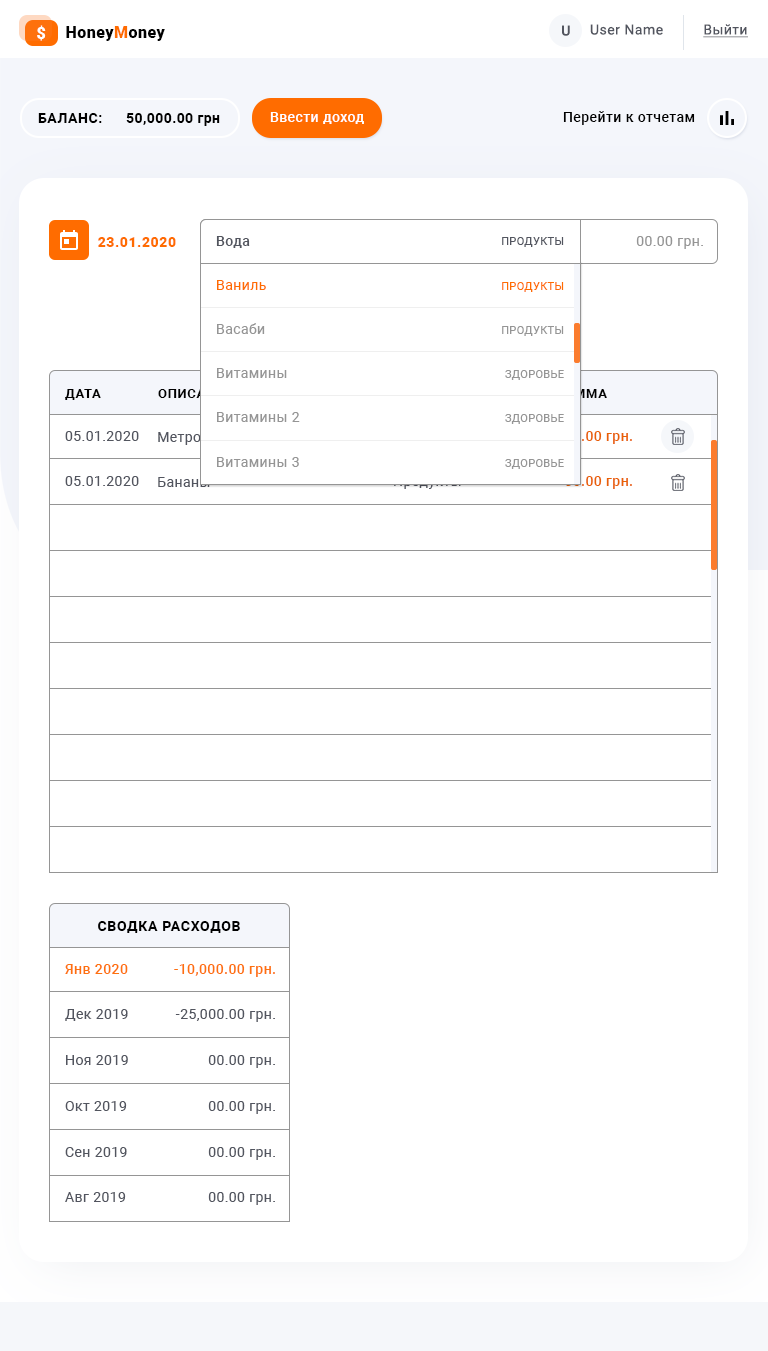
<style>
.page{position:relative;width:768px;height:1351px;background:#ffffff}
.page>*{position:absolute;margin:0}
.t1{font:16px "Roboto-Black";letter-spacing:0.03em;color:#ffffff}
.t2{font:16px "Roboto-Black";letter-spacing:0.03em;color:#000000}
.t3{font:16px "Roboto-Black";letter-spacing:0.03em;color:#ff6c00}
.t4{font:14px "Roboto-Medium";letter-spacing:0.035em;color:#52555f}
.t5{font:14px "Roboto-Regular";letter-spacing:0.035em;color:#52555f}
.t6{font:14px "Roboto-Regular";letter-spacing:0.03em;color:#52555f;text-decoration:underline}
.t7{font:14px "Roboto-Bold";letter-spacing:0.04em;color:#000000;text-transform:uppercase}
.t8{font:14px "Roboto-Bold";letter-spacing:0.03em;color:#000000}
.t9{font:14px "Roboto-Medium";letter-spacing:0.03em;color:#ffffff}
.t10{font:14px "Roboto-Medium";letter-spacing:0.03em;color:#000000}
.t11{font:14px "Roboto-Black";letter-spacing:0.04em;color:#ff6c00}
.t12{font:14px "Roboto-Medium";letter-spacing:0.03em;color:#52555f}
.t13{font:11px "Roboto-Regular";letter-spacing:0.03em;color:#52555f;text-transform:uppercase}
.t14{font:14px "Roboto-Regular";letter-spacing:0.03em;color:#959595}
.t15{font:14px "Roboto-Regular";letter-spacing:0.03em;color:#ff6c00}
.t16{font:11px "Roboto-Regular";letter-spacing:0.03em;color:#ff6c00;text-transform:uppercase}
.t17{font:11px "Roboto-Regular";letter-spacing:0.03em;color:#959595;text-transform:uppercase}
.t18{font:13px "Roboto-Bold";letter-spacing:0.05em;color:#000000;text-transform:uppercase}
.t19{font:13px "Roboto-Bold";letter-spacing:0.05em;text-transform:uppercase}
.t20{font:14px "Roboto-Regular";letter-spacing:0.03em;color:#52555f}
.t21{font:14px "Roboto-Regular";letter-spacing:0.03em;color:#ffffff}
.t22{font:14px "Roboto-Medium";letter-spacing:0.03em}
.t23{font:14px "Roboto-Bold";letter-spacing:0.05em;color:#000000;text-transform:uppercase}
.t24{font:14px "Roboto-Medium";letter-spacing:0.03em;color:#fe710d}
</style>
<div class="page">
<p class="t1" style="left:37px;top:25px;width:9px;height:16px">$</p>
<p class="t2" style="left:66px;top:26px;width:99px;height:15px">Honey<span class="t3">M</span>oney</p>
<p class="t4" style="left:562px;top:25px;width:8px;height:11px">U</p>
<p class="t5" style="left:590px;top:24px;width:73px;height:11px">User Name</p>
<p class="t6" style="left:703px;top:24px;width:45px;height:14px">Выйти</p>
<p class="t7" style="left:38px;top:113px;width:64px;height:10px">баланс:</p>
<p class="t8" style="left:126px;top:113px;width:94px;height:13px">50,000.00 грн</p>
<p class="t9" style="left:270px;top:112px;width:94px;height:12px">Ввести доход</p>
<p class="t10" style="left:563px;top:111px;width:132px;height:14px">Перейти к отчетам</p>
<p class="t11" style="left:98px;top:237px;width:78px;height:10px">23.01.2020</p>
<p class="t12" style="left:216px;top:236px;width:34px;height:12px">Вода</p>
<p class="t13" style="left:502px;top:237px;width:62px;height:10px">Продукты</p>
<p class="t14" style="left:636px;top:236px;width:67px;height:13px">00.00 грн.</p>
<p class="t15" style="left:217px;top:280px;width:49px;height:10px">Ваниль</p>
<p class="t16" style="left:502px;top:282px;width:62px;height:10px">Продукты</p>
<p class="t14" style="left:217px;top:323px;width:48px;height:11px">Васаби</p>
<p class="t17" style="left:502px;top:326px;width:62px;height:10px">Продукты</p>
<p class="t14" style="left:217px;top:368px;width:70px;height:10px">Витамины</p>
<p class="t17" style="left:505px;top:370px;width:59px;height:10px">Здоровье</p>
<p class="t18" style="left:65px;top:389px;width:36px;height:11px">Дата</p>
<p class="t19" style="left:158px;top:389px;width:75px;height:9px">Описание</p>
<p class="t19" style="left:556px;top:389px;width:51px;height:9px">Сумма</p>
<p class="t14" style="left:217px;top:412px;width:83px;height:10px">Витамины 2</p>
<p class="t17" style="left:505px;top:414px;width:59px;height:10px">Здоровье</p>
<p class="t20" style="left:65px;top:431px;width:74px;height:10px">05.01.2020</p>
<p class="t21" style="left:158px;top:431px;width:204px;height:14px">Метро (Lorem ipsum dolor si...</p>
<p class="t22" style="left:555px;top:431px;width:77px;height:13px">- 30.00 грн.</p>
<p class="t14" style="left:217px;top:457px;width:82px;height:10px">Витамины 3</p>
<p class="t17" style="left:505px;top:459px;width:59px;height:10px">Здоровье</p>
<p class="t20" style="left:65px;top:476px;width:74px;height:10px">05.01.2020</p>
<p class="t20" style="left:158px;top:477px;width:52px;height:10px">Бананы</p>
<p class="t22" style="left:555px;top:476px;width:77px;height:13px">- 50.00 грн.</p>
<p class="t23" style="left:98px;top:921px;width:142px;height:12px">Сводка расходов</p>
<p class="t24" style="left:65px;top:964px;width:63px;height:10px">Янв 2020</p>
<p class="t24" style="left:174px;top:964px;width:101px;height:13px">-10,000.00 грн.</p>
<p class="t20" style="left:65px;top:1009px;width:63px;height:12px">Дек 2019</p>
<p class="t20" style="left:175px;top:1009px;width:100px;height:13px">-25,000.00 грн.</p>
<p class="t20" style="left:66px;top:1055px;width:62px;height:10px">Ноя 2019</p>
<p class="t20" style="left:208px;top:1055px;width:67px;height:13px">00.00 грн.</p>
<p class="t20" style="left:65px;top:1101px;width:62px;height:10px">Окт 2019</p>
<p class="t20" style="left:208px;top:1101px;width:67px;height:13px">00.00 грн.</p>
<p class="t20" style="left:65px;top:1147px;width:62px;height:10px">Сен 2019</p>
<p class="t20" style="left:208px;top:1147px;width:67px;height:13px">00.00 грн.</p>
<p class="t20" style="left:65px;top:1192px;width:61px;height:10px">Авг 2019</p>
<p class="t20" style="left:208px;top:1192px;width:67px;height:13px">00.00 грн.</p>
</div>
